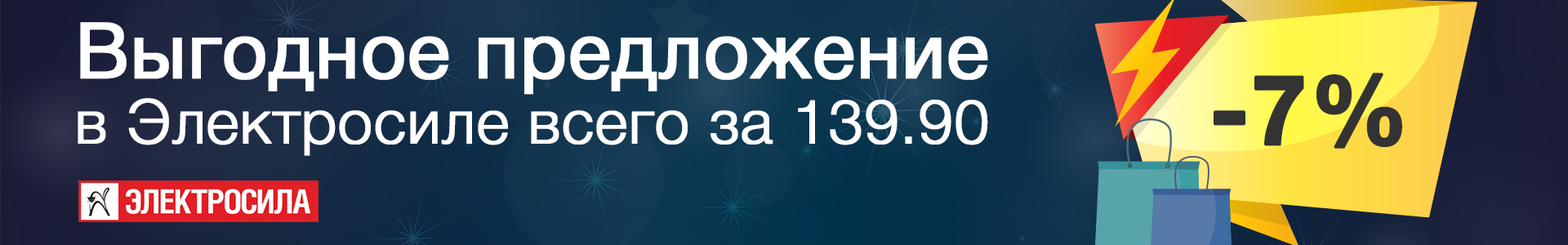
<style>
.page{position:relative;width:1568px;height:245px}
.page>*{position:absolute;margin:0}
.t1{font:61.2px/65.3px "HelveticaNeueCyr-Light";color:#ffffff;font-weight:bold}
.t2{font:77.6px/65.3px "HelveticaNeueCyr-Roman";color:#ffffff;font-weight:bold}
.t3{font:97.7px "HelveticaNeueCyr-Bold";color:#333333;font-weight:bold}
</style>
<div class="page">
<p class="t1" style="left:78px;top:22px;width:910px;height:134px"><span class="t2">Выгодное предложение<br></span>в Электросиле всего за 139.90</p>
<p class="t3" style="left:1214px;top:73px;width:188px;height:76px">-7%</p>
</div>
